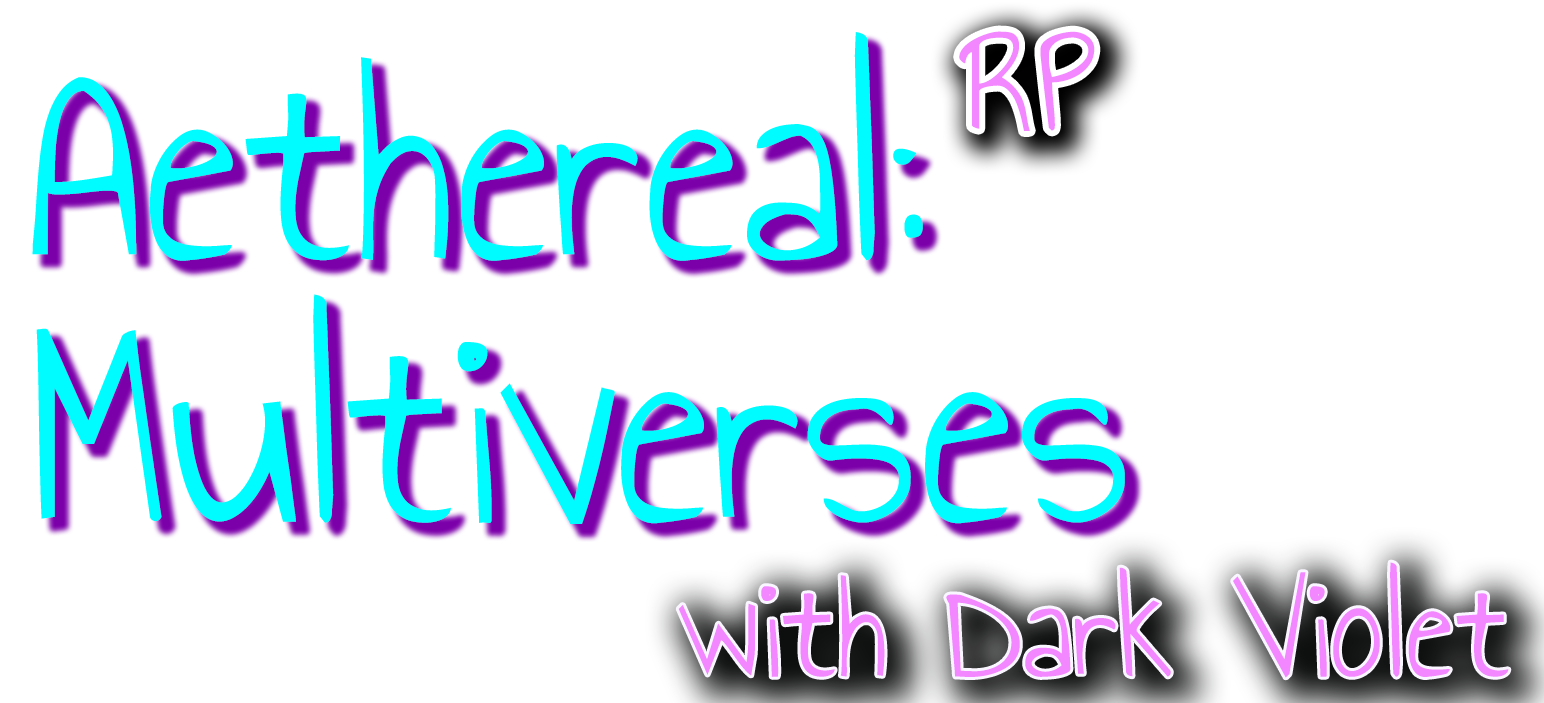
<style>
.page{position:relative;width:1544px;height:703px;background:#ffffff}
.page>*{position:absolute;margin:0}
.t1{font:300px/262.5px "AnnieUseYourTelescope-Regular";color:#00fcff}
.t2{font:150px "AnnieUseYourTelescope-Regular";color:#f287ff}
</style>
<div class="page">
<p class="t1" style="left:32px;top:32px;width:1093px;height:492px">Aethereal: <br>Multiverses</p>
<p class="t2" style="left:959px;top:31px;width:136px;height:100px">RP</p>
<p class="t2" style="left:678px;top:562px;width:831px;height:116px">with Dark Violet</p>
</div>
